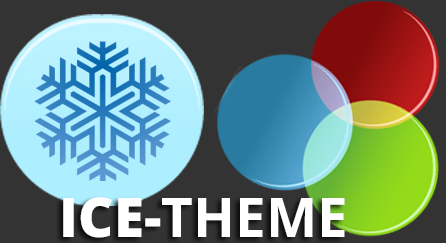
<style>
.page{position:relative;width:446px;height:243px;background:#333333}
.page>*{position:absolute;margin:0}
.t1{font:54.6px "OpenSans-Bold";color:#ffffff}
.t2{font:54.6px "OpenSans-Extrabold";color:#ffffff}
</style>
<div class="page">
<p class="t1" style="left:63px;top:197px;width:282px;height:41px"><span class="t2">ICE-</span>THEME</p>
</div>
